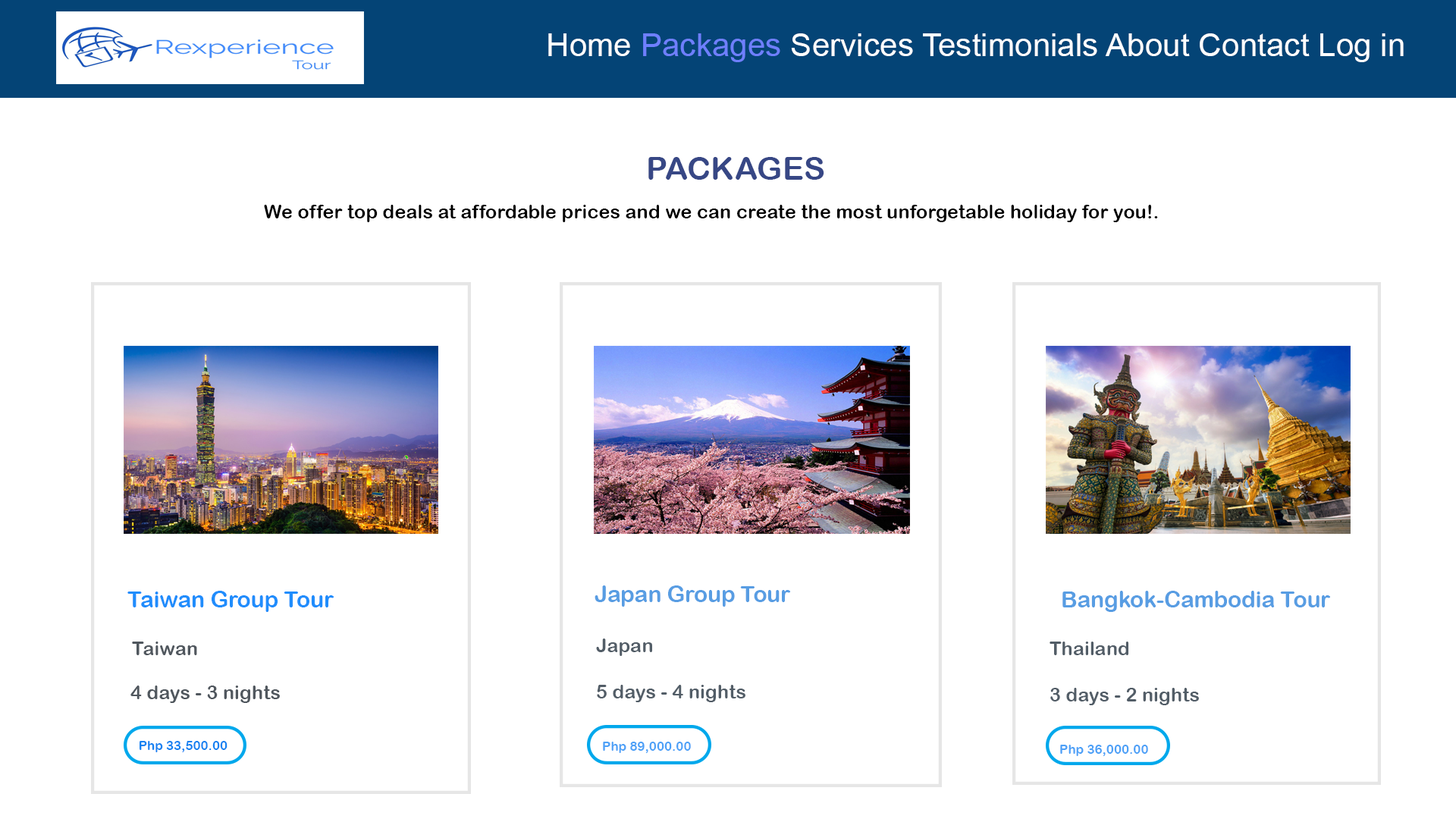
<style>
.page{position:relative;width:1456px;height:819px;background:#ffffff}
.page>*{position:absolute;margin:0}
.t1{font:32.1px "ArialMT";color:#ffffff}
.t2{font:32.1px "ArialMT";color:#6e7fff}
.t3{font:32.1px "ArialRoundedMTBold";color:#374785}
.t4{font:19.3px "ArialRoundedMTBold";color:#000000}
.t5{font:22.5px "ArialRoundedMTBold";color:#208dfc}
.t6{font:22.5px "ArialRoundedMTBold";color:#589de3}
.t7{font:19.3px "ArialRoundedMTBold";color:#50575e}
.t8{font:19.3px "ArialRoundedMTBold";color:#525d67}
.t9{font:12.8px "ArialRoundedMTBold";color:#1682f1}
.t10{font:12.8px "ArialRoundedMTBold";color:#4da1f7}
</style>
<div class="page">
<p class="t1" style="left:548px;top:33px;width:856px;height:29px">Home <span class="t2">Packages </span>Services Testimonials About Contact Log in</p>
<p class="t3" style="left:648px;top:157px;width:176px;height:23px">PACKAGES</p>
<p class="t4" style="left:264px;top:205px;width:894px;height:17px">We offer top deals at affordable prices and we can create the most unforgetable holiday for you!.</p>
<p class="t5" style="left:127px;top:591px;width:207px;height:21px">Taiwan Group Tour</p>
<p class="t6" style="left:595px;top:585px;width:195px;height:22px">Japan Group Tour</p>
<p class="t6" style="left:1062px;top:591px;width:268px;height:21px">Bangkok-Cambodia Tour</p>
<p class="t7" style="left:132px;top:642px;width:65px;height:13px">Taiwan</p>
<p class="t8" style="left:596px;top:639px;width:149px;height:63px">Japan<br><br>5 days - 4 nights</p>
<p class="t8" style="left:1050px;top:642px;width:149px;height:63px">Thailand<br><br>3 days - 2 nights</p>
<p class="t7" style="left:130px;top:686px;width:150px;height:17px">4 days - 3 nights</p>
<p class="t9" style="left:140px;top:741px;width:87px;height:11px">Php 33,500.00</p>
<p class="t10" style="left:603px;top:742px;width:88px;height:11px">Php 89,000.00</p>
<p class="t10" style="left:1060px;top:745px;width:88px;height:11px">Php 36,000.00</p>
</div>
